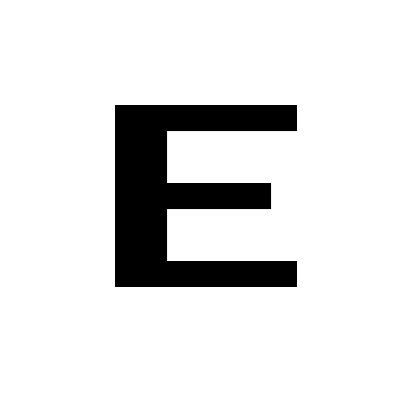
<style>
.page{position:relative;width:416px;height:410px;background:#ffffff}
.page>*{position:absolute;margin:0}
.t1{font:208.3px "PressStart2P";color:#000000}
</style>
<div class="page">
<p class="t1" style="left:115px;top:105px;width:182px;height:182px">E</p>
</div>
